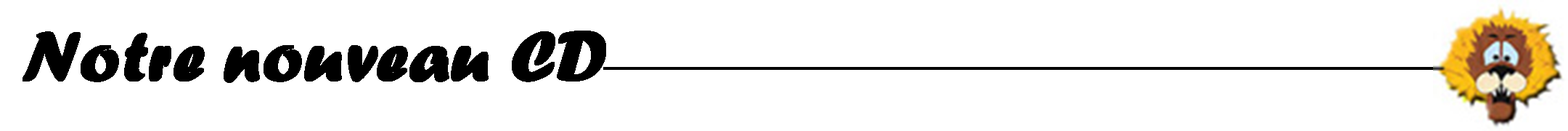
<style>
.page{position:relative;width:1568px;height:131px;background:#ffffff}
.page>*{position:absolute;margin:0}
.t1{font:72.6px "ForteMT";color:#000000;font-weight:bold}
</style>
<div class="page">
<p class="t1" style="left:23px;top:30px;width:583px;height:53px">Notre nouveau CD</p>
</div>
